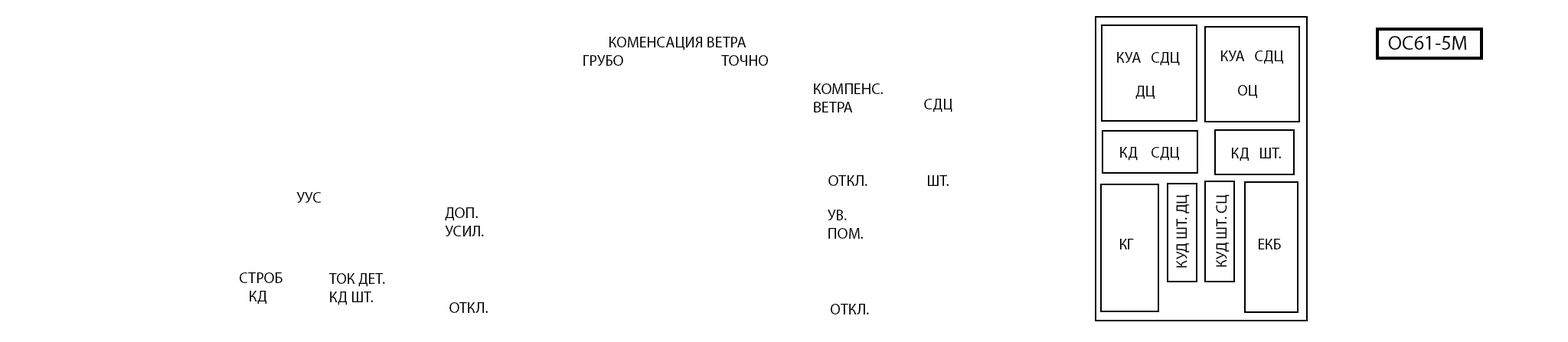
<style>
.page{position:relative;width:1568px;height:342px;background:#ffffff}
.page>*{position:absolute;margin:0}
.t1{font:15.3px "MyriadPro-Regular";color:#000000}
.t2{font:20.4px "MyriadPro-Regular";color:#000000}
</style>
<div class="page">
<p class="t1" style="left:609px;top:37px;width:137px;height:14px">КОМЕНСАЦИЯ ВЕТРА</p>
<p class="t2" style="left:1388px;top:36px;width:79px;height:14px">ОС61-5М</p>
<p class="t1" style="left:1117px;top:52px;width:63px;height:14px">КУА   СДЦ</p>
<p class="t1" style="left:1221px;top:51px;width:62px;height:13px">КУА   СДЦ</p>
<p class="t1" style="left:583px;top:55px;width:40px;height:11px">ГРУБО</p>
<p class="t1" style="left:721px;top:55px;width:47px;height:11px">ТОЧНО</p>
<p class="t1" style="left:814px;top:83px;width:69px;height:30px">КОМПЕНС.<br>ВЕТРА</p>
<p class="t1" style="left:1135px;top:86px;width:20px;height:14px">ДЦ</p>
<p class="t1" style="left:1238px;top:85px;width:19px;height:14px">ОЦ</p>
<p class="t1" style="left:924px;top:99px;width:28px;height:14px">СДЦ</p>
<p class="t1" style="left:1120px;top:147px;width:59px;height:14px">КД    СДЦ</p>
<p class="t1" style="left:1232px;top:148px;width:49px;height:14px">КД   ШТ.</p>
<p class="t1" style="left:828px;top:175px;width:39px;height:11px">ОТКЛ.</p>
<p class="t1" style="left:928px;top:175px;width:21px;height:11px">ШТ.</p>
<p class="t1" style="left:296px;top:192px;width:26px;height:11px">УУС</p>
<p class="t1" style="left:1176px;top:194px;width:14px;height:74px;rotate:-90deg">КУД ШТ. ДЦ</p>
<p class="t1" style="left:1216px;top:194px;width:14px;height:73px;rotate:-90deg">КУД ШТ. СЦ</p>
<p class="t1" style="left:445px;top:207px;width:39px;height:30px">ДОП.<br>УСИЛ.</p>
<p class="t1" style="left:828px;top:210px;width:35px;height:29px">УВ.<br>ПОМ.</p>
<p class="t1" style="left:1120px;top:239px;width:14px;height:11px">КГ</p>
<p class="t1" style="left:1259px;top:239px;width:22px;height:11px">ЕКБ</p>
<p class="t1" style="left:240px;top:273px;width:43px;height:32px">СТРОБ<br>   КД</p>
<p class="t1" style="left:329px;top:273px;width:56px;height:32px">ТОК ДЕТ.<br>КД ШТ.</p>
<p class="t1" style="left:449px;top:302px;width:39px;height:11px">ОТКЛ.</p>
<p class="t1" style="left:831px;top:304px;width:38px;height:11px">ОТКЛ.</p>
</div>
